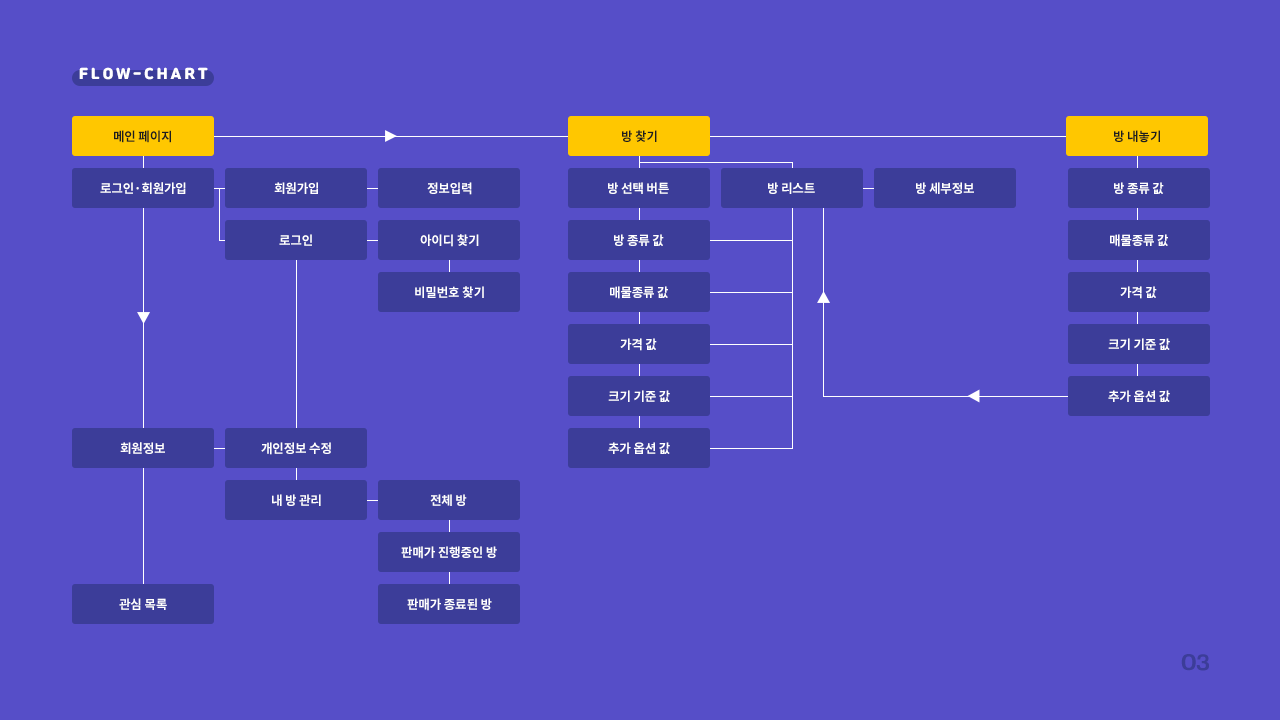
<style>
.page{position:relative;width:1280px;height:720px;background:#564ec8}
.page>*{position:absolute;margin:0}
.t1{font:14px "JalnanOTF";letter-spacing:0.22em;color:#ffffff}
.t2{font:12.6px "NotoSansKR-Bold";letter-spacing:-0.02em;color:#1e1e1e}
.t3{font:12.6px "NotoSansKR-Bold";letter-spacing:-0.02em;color:#ffffff}
.t4{font:22px "FivoSans-Bold";letter-spacing:-0.025em;color:#3c3d99}
</style>
<div class="page">
<p class="t1" style="left:79px;top:67px;width:129px;height:13px">FLOW-CHART</p>
<p class="t2" style="left:114px;top:130px;width:57px;height:13px">메인 페이지</p>
<p class="t2" style="left:622px;top:130px;width:35px;height:12px">방 찾기</p>
<p class="t2" style="left:1114px;top:130px;width:46px;height:13px">방 내놓기</p>
<p class="t3" style="left:100px;top:182px;width:86px;height:12px">로그인·회원가입</p>
<p class="t3" style="left:274px;top:182px;width:44px;height:12px">회원가입</p>
<p class="t3" style="left:427px;top:182px;width:45px;height:13px">정보입력</p>
<p class="t3" style="left:608px;top:182px;width:61px;height:12px">방 선택 버튼</p>
<p class="t3" style="left:768px;top:182px;width:47px;height:12px">방 리스트</p>
<p class="t3" style="left:916px;top:182px;width:58px;height:12px">방 세부정보</p>
<p class="t3" style="left:1114px;top:182px;width:50px;height:12px">방 종류 값</p>
<p class="t3" style="left:279px;top:234px;width:33px;height:12px">로그인</p>
<p class="t3" style="left:420px;top:234px;width:59px;height:13px">아이디 찾기</p>
<p class="t3" style="left:614px;top:234px;width:50px;height:12px">방 종류 값</p>
<p class="t3" style="left:1110px;top:234px;width:58px;height:13px">매물종류 값</p>
<p class="t3" style="left:415px;top:286px;width:69px;height:12px">비밀번호 찾기</p>
<p class="t3" style="left:610px;top:286px;width:58px;height:13px">매물종류 값</p>
<p class="t3" style="left:1120px;top:286px;width:37px;height:13px">가격 값</p>
<p class="t3" style="left:620px;top:338px;width:37px;height:13px">가격 값</p>
<p class="t3" style="left:1108px;top:338px;width:62px;height:12px">크기 기준 값</p>
<p class="t3" style="left:608px;top:390px;width:62px;height:12px">크기 기준 값</p>
<p class="t3" style="left:1108px;top:390px;width:62px;height:12px">추가 옵션 값</p>
<p class="t3" style="left:120px;top:442px;width:45px;height:12px">회원정보</p>
<p class="t3" style="left:261px;top:442px;width:70px;height:13px">개인정보 수정</p>
<p class="t3" style="left:608px;top:442px;width:62px;height:12px">추가 옵션 값</p>
<p class="t3" style="left:272px;top:494px;width:49px;height:12px">내 방 관리</p>
<p class="t3" style="left:430px;top:494px;width:37px;height:12px">전체 방</p>
<p class="t3" style="left:401px;top:546px;width:96px;height:13px">판매가 진행중인 방</p>
<p class="t3" style="left:119px;top:598px;width:48px;height:12px">관심 목록</p>
<p class="t3" style="left:407px;top:598px;width:85px;height:13px">판매가 종료된 방</p>
<p class="t4" style="left:1181px;top:654px;width:28px;height:17px">03</p>
</div>
